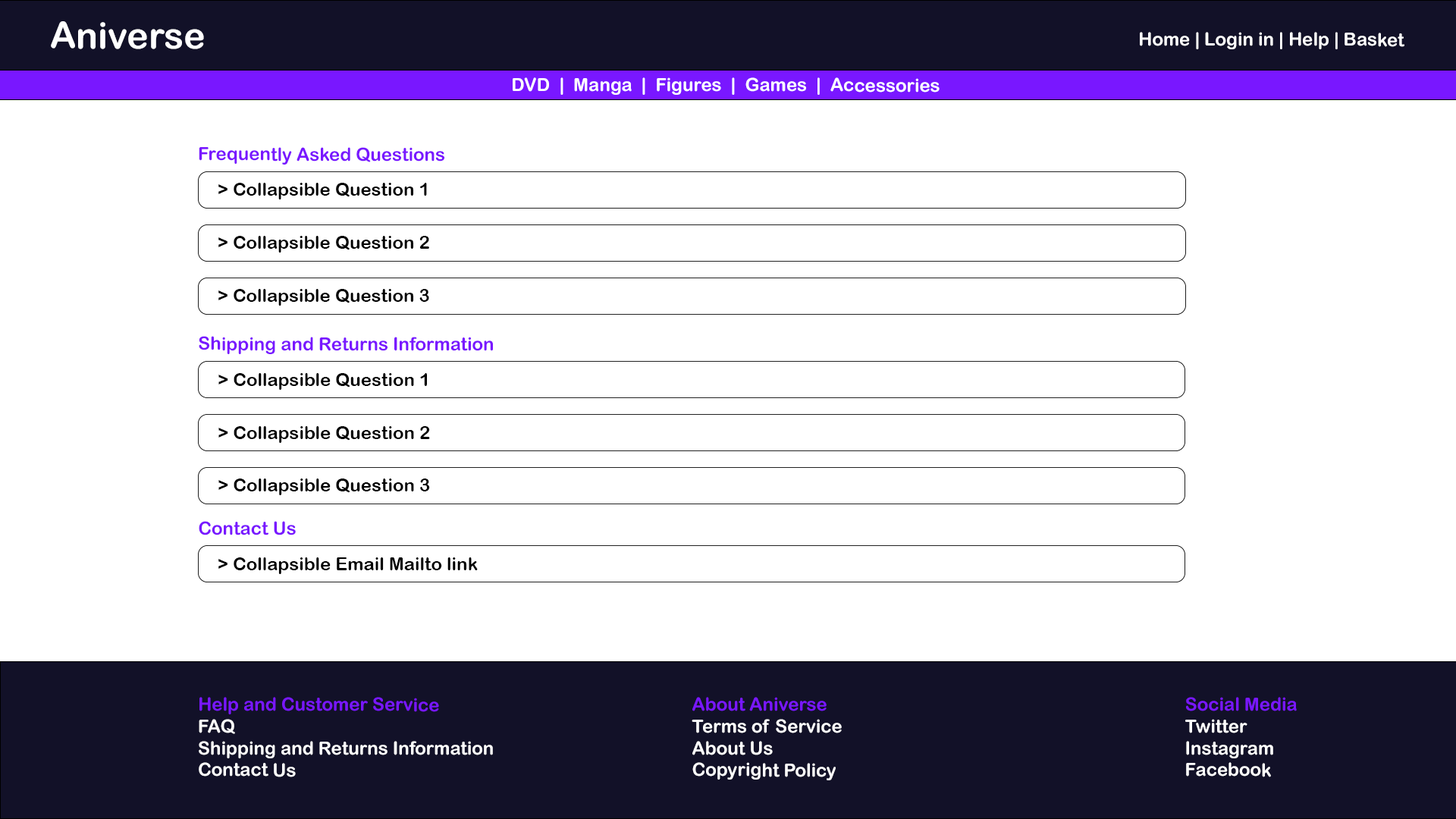
<style>
.page{position:relative;width:1456px;height:819px;background:#ffffff}
.page>*{position:absolute;margin:0}
.t1{font:36.4px "ArialRoundedMTBold";color:#ffffff}
.t2{font:18.2px "ArialRoundedMTBold";color:#ffffff}
.t3{font:18.2px "ArialRoundedMTBold";color:#7917ff}
.t4{font:18.2px "ArialRoundedMTBold";color:#000000}
</style>
<div class="page">
<p class="t1" style="left:51px;top:21px;width:153px;height:28px">Aniverse</p>
<p class="t2" style="left:1140px;top:32px;width:264px;height:17px">Home | Login in | Help | Basket</p>
<p class="t2" style="left:513px;top:77px;width:427px;height:18px">DVD  |  Manga  |  Figures  |  Games  |  Accessories</p>
<p class="t3" style="left:199px;top:147px;width:245px;height:18px">Frequently Asked Questions</p>
<p class="t4" style="left:218px;top:183px;width:209px;height:16px">&gt; Collapsible Question 1</p>
<p class="t4" style="left:218px;top:236px;width:211px;height:17px">&gt; Collapsible Question 2</p>
<p class="t4" style="left:218px;top:289px;width:211px;height:17px">&gt; Collapsible Question 3</p>
<p class="t3" style="left:199px;top:336px;width:294px;height:18px">Shipping and Returns Information</p>
<p class="t4" style="left:218px;top:373px;width:209px;height:17px">&gt; Collapsible Question 1</p>
<p class="t4" style="left:218px;top:426px;width:212px;height:17px">&gt; Collapsible Question 2</p>
<p class="t4" style="left:218px;top:479px;width:212px;height:16px">&gt; Collapsible Question 3</p>
<p class="t3" style="left:199px;top:521px;width:97px;height:14px">Contact Us</p>
<p class="t4" style="left:218px;top:557px;width:260px;height:17px">&gt; Collapsible Email Mailto link</p>
<p class="t2" style="left:199px;top:697px;width:294px;height:80px"><span class="t3">Help and Customer Service<br></span>FAQ<br>Shipping and Returns Information<br>Contact Us</p>
<p class="t2" style="left:692px;top:697px;width:150px;height:83px"><span class="t3">About Aniverse<br></span>Terms of Service<br>About Us<br>Copyright Policy</p>
<p class="t2" style="left:1185px;top:697px;width:112px;height:80px"><span class="t3">Social Media<br></span>Twitter<br>Instagram<br>Facebook</p>
</div>
